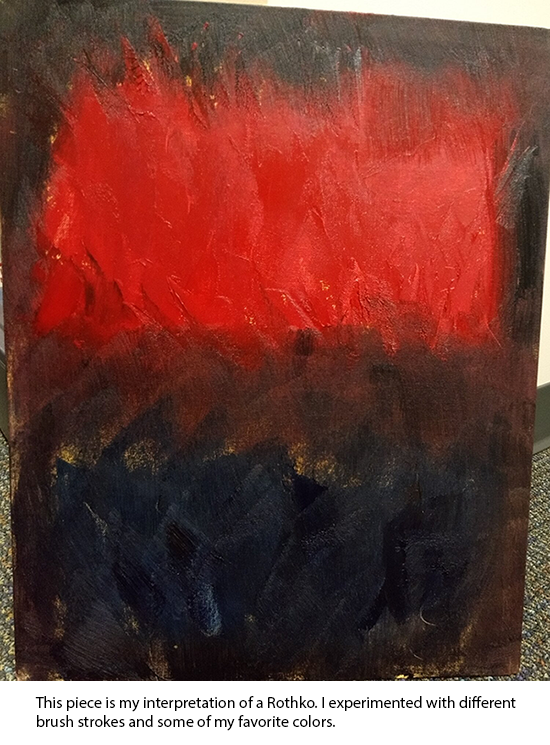
<style>
.page{position:relative;width:550px;height:745px}
.page>*{position:absolute;margin:0}
.t1{font:16px "MyriadPro-Regular";color:#000000}
</style>
<div class="page">
<p class="t1" style="left:35px;top:696px;width:481px;height:35px">This piece is my interpretation of a Rothko. I experimented with different brush strokes and some of my favorite colors.</p>
</div>
